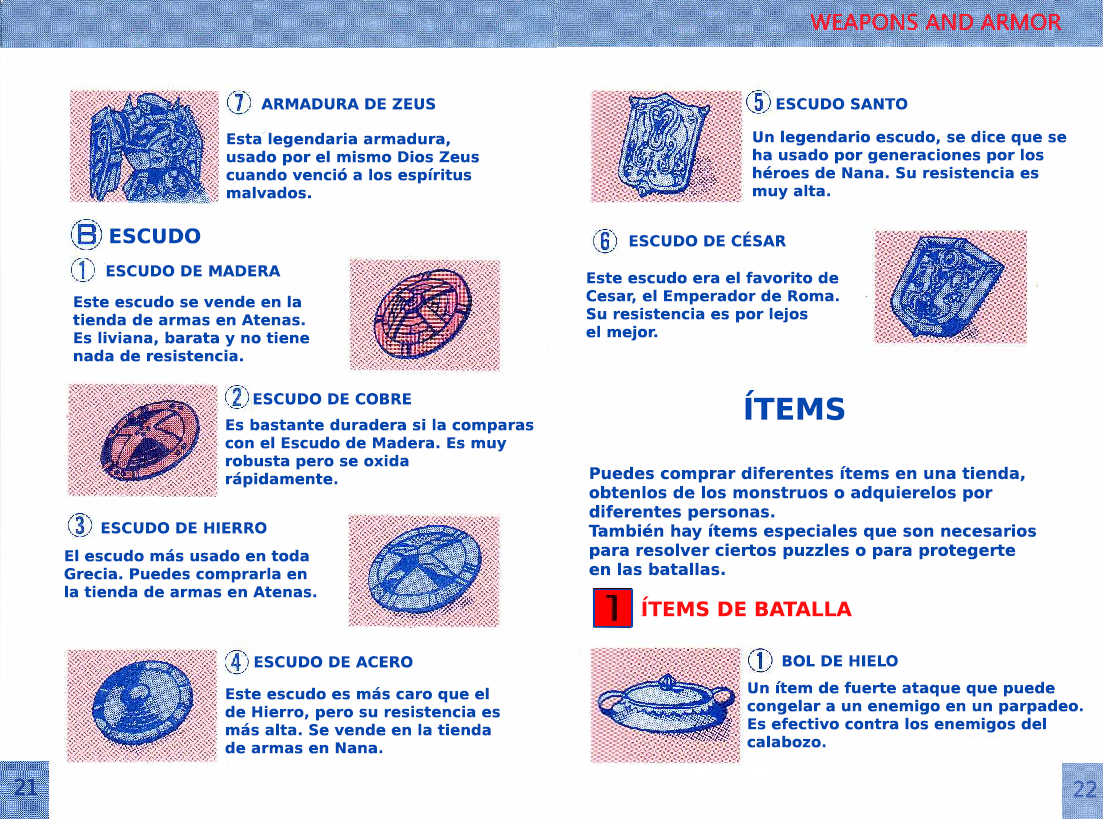
<style>
.page{position:relative;width:1103px;height:819px;background:#fefefe}
.page>*{position:absolute;margin:0}
.t1{font:15px "PrimaSansBT-Bold";color:#0247af}
.t2{font:20px "PrimaSansBT-Bold";color:#0247af}
.t3{font:30px "PrimaSansBT-Bold";color:#0247af}
.t4{font:16px "PrimaSansBT-Bold";color:#0247af}
.t5{font:20px "PrimaSansBT-Bold";color:#ff0e0f}
</style>
<div class="page">
<p class="t1" style="left:261px;top:98px;width:175px;height:12px">ARMADURA DE ZEUS</p>
<p class="t1" style="left:776px;top:98px;width:132px;height:12px">ESCUDO SANTO</p>
<p class="t1" style="left:226px;top:132px;width:253px;height:67px">Esta legendaria armadura,<br>usado por el mismo Dios Zeus<br>cuando venció a los espíritus<br>malvados.</p>
<p class="t1" style="left:753px;top:130px;width:314px;height:70px">Un legendario escudo, se dice que se <br>ha usado por generaciones por los <br>héroes de Nana. Su resistencia es <br>muy alta.</p>
<p class="t2" style="left:110px;top:228px;width:91px;height:16px">ESCUDO</p>
<p class="t1" style="left:629px;top:231px;width:157px;height:16px">ESCUDO DE CÉSAR</p>
<p class="t1" style="left:106px;top:265px;width:175px;height:12px">ESCUDO DE MADERA</p>
<p class="t1" style="left:586px;top:271px;width:253px;height:70px">Este escudo era el favorito de <br>Cesar, el Emperador de Roma. <br>Su resistencia es por lejos <br>el mejor.</p>
<p class="t1" style="left:73px;top:295px;width:237px;height:67px">Este escudo se vende en la<br>tienda de armas en Atenas. <br>Es liviana, barata y no tiene<br>nada de resistencia.</p>
<p class="t3" style="left:745px;top:390px;width:100px;height:31px">ÍTEMS</p>
<p class="t1" style="left:253px;top:393px;width:158px;height:12px">ESCUDO DE COBRE</p>
<p class="t1" style="left:225px;top:418px;width:309px;height:70px">Es bastante duradera si la comparas<br>con el Escudo de Madera. Es muy<br>robusta pero se oxida<br>rápidamente.</p>
<p class="t4" style="left:588px;top:466px;width:449px;height:110px">Puedes comprar diferentes ítems en una tienda,<br>obtenlos de los monstruos o adquierelos por <br>diferentes personas.<br>También hay ítems especiales que son necesarios<br>para resolver ciertos puzzles o para protegerte<br>en las batallas.</p>
<p class="t1" style="left:101px;top:522px;width:166px;height:12px">ESCUDO DE HIERRO</p>
<p class="t1" style="left:64px;top:549px;width:253px;height:49px">El escudo más usado en toda<br>Grecia. Puedes comprarla en<br>la tienda de armas en Atenas.</p>
<p class="t5" style="left:642px;top:596px;width:210px;height:21px">ÍTEMS DE BATALLA</p>
<p class="t1" style="left:254px;top:656px;width:159px;height:12px">ESCUDO DE ACERO</p>
<p class="t1" style="left:782px;top:655px;width:116px;height:12px">BOL DE HIELO</p>
<p class="t1" style="left:225px;top:687px;width:275px;height:67px">Este escudo es más caro que el<br>de Hierro, pero su resistencia es<br>más alta. Se vende en la tienda<br>de armas en Nana.</p>
<p class="t1" style="left:747px;top:681px;width:336px;height:67px">Un ítem de fuerte ataque que puede<br>congelar a un enemigo en un parpadeo.<br>Es efectivo contra los enemigos del<br>calabozo.</p>
</div>
